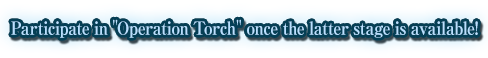
<style>
.page{position:relative;width:488px;height:58px}
.page>*{position:absolute;margin:0}
.t1{font:18px "RyuminPro-ExBold";letter-spacing:-0.04em;color:#b9e0ff;scale:0.9 1}
</style>
<div class="page">
<p class="t1" style="left:11px;top:19px;width:467px;height:19px">Participate in "Operation Torch" once the latter stage is available!</p>
</div>
